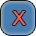
<style>
.page{position:relative;width:36px;height:36px;background:#457eaf}
.page>*{position:absolute;margin:0}
.t1{font:22px "Latha";color:#f85c5c}
</style>
<div class="page">
<p class="t1" style="left:12px;top:11px;width:14px;height:14px">X</p>
</div>
